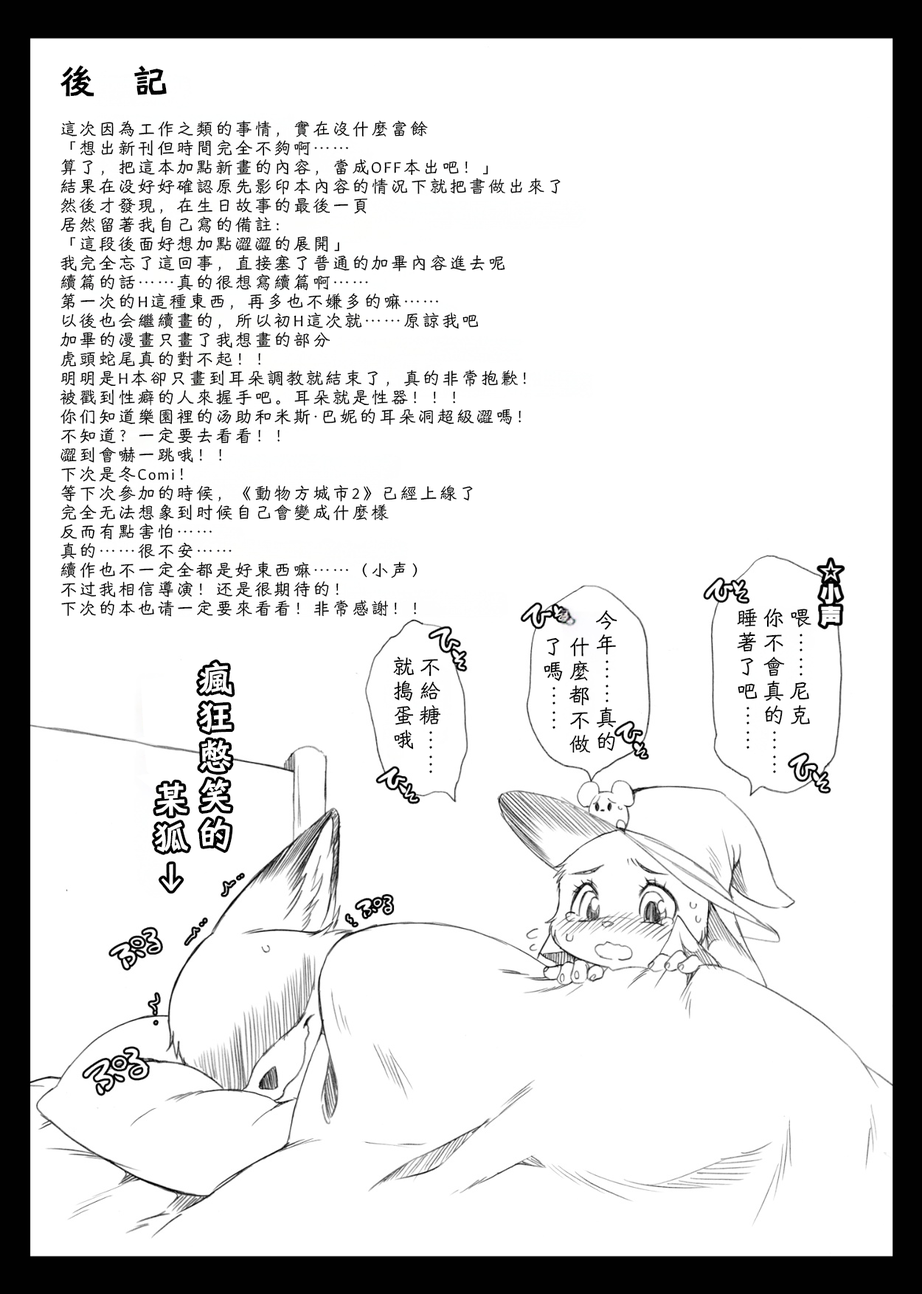
<style>
.page{position:relative;width:922px;height:1294px;background:#ffffff}
.page>*{position:absolute;margin:0}
.t1{font:17.7px/19.2px "HYShiWei55U";letter-spacing:0.1em;color:#000000}
.t2{font:35.4px/22.1px "HYShiWei75U";letter-spacing:1.06em;color:#000000}
.t3{font:22.1px/26.5px "HYShiWei55U";letter-spacing:0.1em;color:#000000}
</style>
<div class="page">
<p class="t1" style="left:60px;top:65px;width:500px;height:552px"><span class="t2">後記<br>  <br></span>這次因為工作之類的事情，實在沒什麼富餘  <br>「想出新刊但時間完全不夠啊……  <br>算了，把這本加點新畫的內容，當成OFF本出吧！」  <br>結果在没好好確認原先影印本內容的情況下就把書做出來了  <br>然後才發現，在生日故事的最後一頁<br>居然留著我自己寫的備註：  <br>「這段後面好想加點澀澀的展開」  <br>我完全忘了這回事，直接塞了普通的加畢內容進去呢  <br>續篇的話……真的很想寫續篇啊……  <br>第一次的H這種東西，再多也不嫌多的嘛……  <br>以後也会繼續畫的，所以初H這次就……原諒我吧  <br>加畢的漫畫只畫了我想畫的部分<br>虎頭蛇尾真的對不起！！  <br>明明是H本卻只畫到耳朵調教就結束了，真的非常抱歉！  <br>被戳到性癖的人來握手吧。耳朵就是性器！！！  <br>你们知道樂園裡的汤助和米斯·巴妮的耳朵洞超級澀嗎！  <br>不知道？一定要去看看！！  <br>澀到會嚇一跳哦！！  <br>下次是冬Comi！ <br>等下次參加的時候，《動物方城市2》已經上線了  <br>完全无法想象到时候自己會變成什麼樣<br>反而有點害怕……<br>真的……很不安……  <br>續作也不一定全都是好東西嘛……（小声）  <br>不过我相信導演！还是很期待的！  <br>下次的本也请一定要來看看！非常感謝！！</p>
<p class="t3" style="left:544px;top:610px;width:73px;height:143px">今年……真的<br>    什麼都不做<br>    了嗎……</p>
<p class="t3" style="left:737px;top:608px;width:74px;height:165px">喂……尼克<br>你不會真的……<br>睡著了吧……</p>
<p class="t3" style="left:393px;top:656px;width:48px;height:117px">不給糖……<br>就搗蛋哦</p>
</div>
